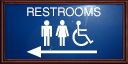
<style>
.page{position:relative;width:128px;height:64px}
.page>*{position:absolute;margin:0}
.t1{font:12px "Helvetica";letter-spacing:-0.019em;color:#ffffff}
</style>
<div class="page">
<p class="t1" style="left:27px;top:7px;width:74px;height:10px">RESTROOMS</p>
</div>
